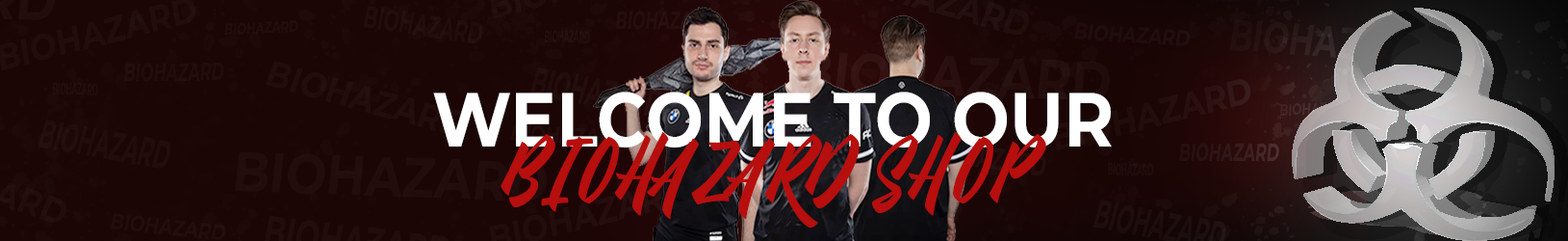
<style>
.page{position:relative;width:1568px;height:241px;background:#1b0505}
.page>*{position:absolute;margin:0}
.t1{font:30.7px "Montserrat-Bold";color:#220c0c;scale:0.6 1}
.t2{font:16px "Montserrat-Bold";color:#220c0c;scale:0.71 1}
.t3{font:17px "Montserrat-Bold";color:#240d0d;scale:0.41 1}
.t4{font:22.3px "Montserrat-Bold";color:#200d0d;scale:0.8 1}
.t5{font:24.9px "Montserrat-Bold";color:#220c0c;scale:0.62 1}
.t6{font:17px "Montserrat-Bold";color:#220c0c;scale:0.41 1}
.t7{font:76.5px "Montserrat-Bold";color:#ffffff;scale:0.89 1}
.t8{font:40.5px "Montserrat-Bold";color:#220c0c;scale:0.5 1}
.t9{font:106.2px "MeatBuckets";color:#b70e0e;scale:0.86 1}
.t10{font:24.9px "Montserrat-Bold";color:#321919;scale:0.62 1}
.t11{font:56px "Montserrat-Bold";color:#220c0c;scale:0.86 1}
.t12{font:16.9px "Montserrat-Bold";color:#210c0c;scale:0.41 1}
.t13{font:22.3px "Montserrat-Bold";color:#220c0c;scale:0.8 1}
</style>
<div class="page">
<p class="t1" style="left:363px;top:6px;width:120px;height:38px;rotate:8deg">BIOHAZARD</p>
<p class="t2" style="left:224px;top:20px;width:74px;height:16px;rotate:-3deg">BIOHAZARD</p>
<p class="t3" style="left:544px;top:30px;width:46px;height:14px;rotate:2deg">BIOHAZARD</p>
<p class="t4" style="left:1074px;top:23px;width:116px;height:23px;rotate:4deg">BIOHAZARD</p>
<p class="t5" style="left:124px;top:63px;width:100px;height:19px">BIOHAZARD</p>
<p class="t6" style="left:52px;top:82px;width:46px;height:14px;rotate:2deg">BIOHAZARD</p>
<p class="t7" style="left:433px;top:91px;width:679px;height:56px">WELCOME TO OUR</p>
<p class="t8" style="left:38px;top:119px;width:133px;height:49px;rotate:10deg">BIOHAZARD</p>
<p class="t9" style="left:501px;top:132px;width:545px;height:96px">BIOHAZARD SHOP</p>
<p class="t10" style="left:1179px;top:142px;width:100px;height:20px">BIOHAZARD</p>
<p class="t11" style="left:235px;top:151px;width:312px;height:50px;rotate:2deg">BIOHAZARD</p>
<p class="t12" style="left:1108px;top:162px;width:45px;height:14px;rotate:2deg">BIOHAZARD</p>
<p class="t13" style="left:110px;top:213px;width:116px;height:27px;rotate:6deg">BIOHAZARD</p>
</div>
